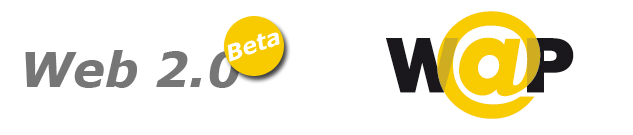
<style>
.page{position:relative;width:633px;height:135px;background:#ffffff}
.page>*{position:absolute;margin:0}
.t1{font:22.4px "Verdana-BoldItalic";color:#ffffff}
.t2{font:48px "Verdana-BoldItalic";color:#767676}
</style>
<div class="page">
<p class="t1" style="left:227px;top:32px;width:53px;height:30px;rotate:-20deg">Beta</p>
<p class="t2" style="left:25px;top:50px;width:216px;height:38px">Web 2.0</p>
</div>
